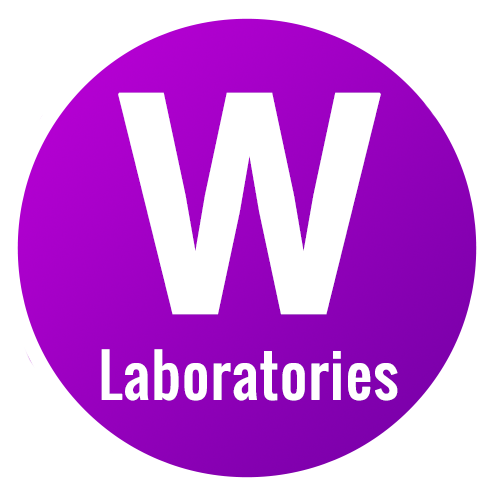
<style>
.page{position:relative;width:500px;height:500px;background:#ffffff}
.page>*{position:absolute;margin:0}
.t1{font:250.5px "Oswald-Regular";color:#ffffff;font-weight:bold;scale:1.39 1}
.t2{font:57.2px "Oswald-Regular";color:#ffffff;font-weight:bold}
</style>
<div class="page">
<p class="t1" style="left:118px;top:92px;width:263px;height:223px">W</p>
<p class="t2" style="left:101px;top:349px;width:297px;height:52px">Laboratories</p>
</div>
